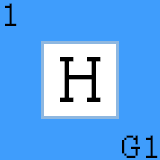
<style>
.page{position:relative;width:160px;height:160px;background:#3f9dfc}
.page>*{position:absolute;margin:0}
.t1{font:36px "Courier-Pixel";color:#000000}
.t2{font:72px "Courier-Pixel";color:#000000}
</style>
<div class="page">
<p class="t1" style="left:5px;top:3px;width:12px;height:23px">1</p>
<p class="t2" style="left:60px;top:57px;width:41px;height:45px">H</p>
<p class="t1" style="left:122px;top:135px;width:36px;height:23px">G1</p>
</div>
